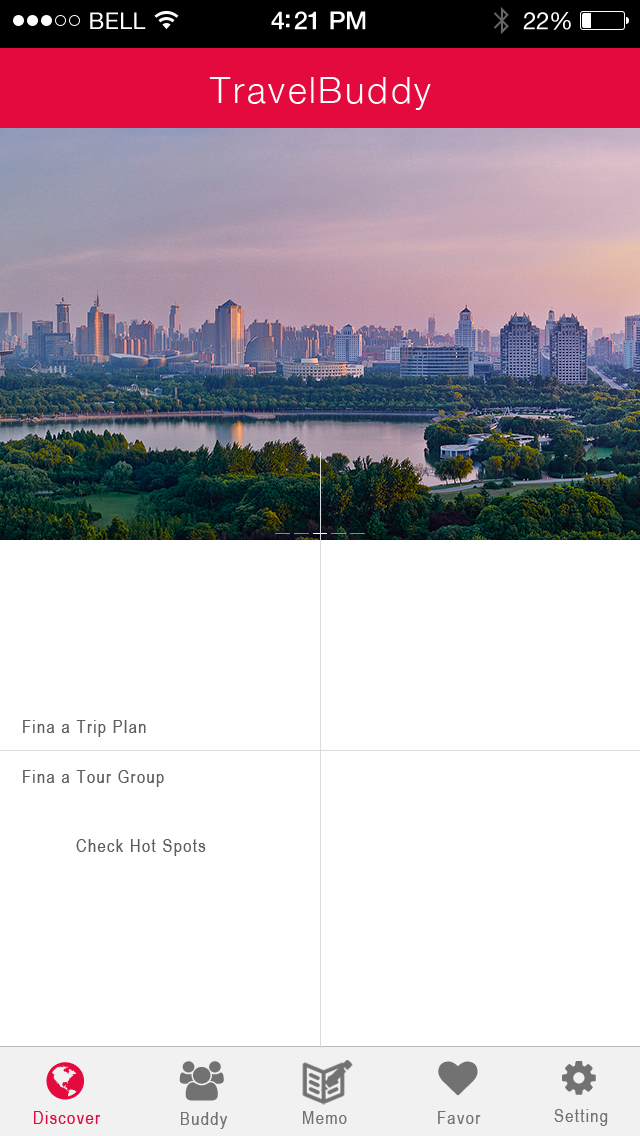
<style>
.page{position:relative;width:640px;height:1136px;background:#ffffff}
.page>*{position:absolute;margin:0}
.t1{font:36px "HelveticaNeue-Light";letter-spacing:0.075em;color:#fffefe}
.t2{font:18px "ArialNarrow";letter-spacing:0.075em;color:#5e5e5e}
.t3{font:18px "ArialNarrow";letter-spacing:0.075em;color:#727272}
.t4{font:18px "ArialNarrow";letter-spacing:0.075em;color:#e50a3d}
</style>
<div class="page">
<p class="t1" style="left:209px;top:77px;width:222px;height:33px">TravelBuddy</p>
<p class="t2" style="left:23px;top:720px;width:123px;height:17px">Fina a Trip Plan</p>
<p class="t2" style="left:23px;top:770px;width:141px;height:17px">Fina a Tour Group</p>
<p class="t2" style="left:76px;top:839px;width:130px;height:17px">Check Hot Spots</p>
<p class="t3" style="left:554px;top:1109px;width:54px;height:17px">Setting</p>
<p class="t4" style="left:34px;top:1111px;width:66px;height:13px">Discover</p>
<p class="t3" style="left:181px;top:1112px;width:47px;height:17px">Buddy</p>
<p class="t3" style="left:303px;top:1111px;width:44px;height:13px">Memo</p>
<p class="t3" style="left:438px;top:1111px;width:43px;height:13px">Favor</p>
</div>
